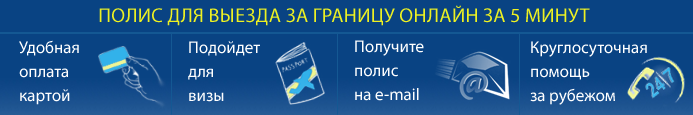
<style>
.page{position:relative;width:693px;height:115px;background:#094383}
.page>*{position:absolute;margin:0}
.t1{font:20px "MyriadPro-Regular";color:#edf122;text-transform:uppercase}
.t2{font:17px/24px "MyriadPro-Regular";color:#ffffff}
</style>
<div class="page">
<p class="t1" style="left:99px;top:5px;width:491px;height:21px">Полис для выезда за границу онлайн за 5 минут</p>
<p class="t2" style="left:19px;top:40px;width:60px;height:65px">Удобная <br>оплата<br>картой</p>
<p class="t2" style="left:188px;top:41px;width:72px;height:61px">Подойдет<br>для <br>визы</p>
<p class="t2" style="left:355px;top:40px;width:69px;height:61px">Получите <br>полис <br>на e-mail</p>
<p class="t2" style="left:530px;top:41px;width:117px;height:64px">Круглосуточная<br>помощь <br>за рубежом</p>
</div>
